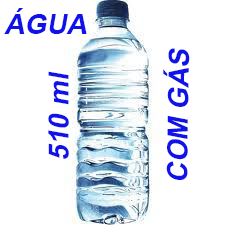
<style>
.page{position:relative;width:225px;height:225px;background:#ffffff}
.page>*{position:absolute;margin:0}
.t1{font:48px "Arial-BoldMT";color:#1111ea;font-style:italic}
</style>
<div class="page">
<p class="t1" style="left:4px;top:8px;width:83px;height:26px">ÁGUA</p>
<p class="t1" style="left:163px;top:48px;width:27px;height:132px;rotate:-89deg">COM GÁS</p>
<p class="t1" style="left:48px;top:71px;width:21px;height:88px;rotate:-90deg">510 ml</p>
</div>
